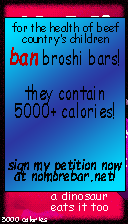
<style>
.page{position:relative;width:128px;height:224px}
.page>*{position:absolute;margin:0}
.t1{font:12.4px/11.2px "ComicSansMS";color:#000000;scale:0.86 1}
.t2{font:19.6px/17.7px "ComicSansMS";color:#000000;scale:0.73 1}
.t3{font:23.9px/17.7px "ComicSansMS-BoldItalic";color:#ba0000;scale:0.73 1}
.t4{font:15.3px/11.3px "ComicSansMS-BoldItalic";color:#000000;scale:0.77 1}
</style>
<div class="page">
<p class="t1" style="left:12px;top:22px;width:107px;height:24px;text-align:center">for the health of beef<br>country’s children</p>
<p class="t2" style="left:10px;top:47px;width:109px;height:72px;text-align:center"><span class="t3">ban</span> broshi bars!<br><br>they contain<br>5000+ calories!</p>
<p class="t4" style="left:8px;top:159px;width:114px;height:23px;text-align:center">sign my petition now<br>at nomorebar.net!</p>
</div>
